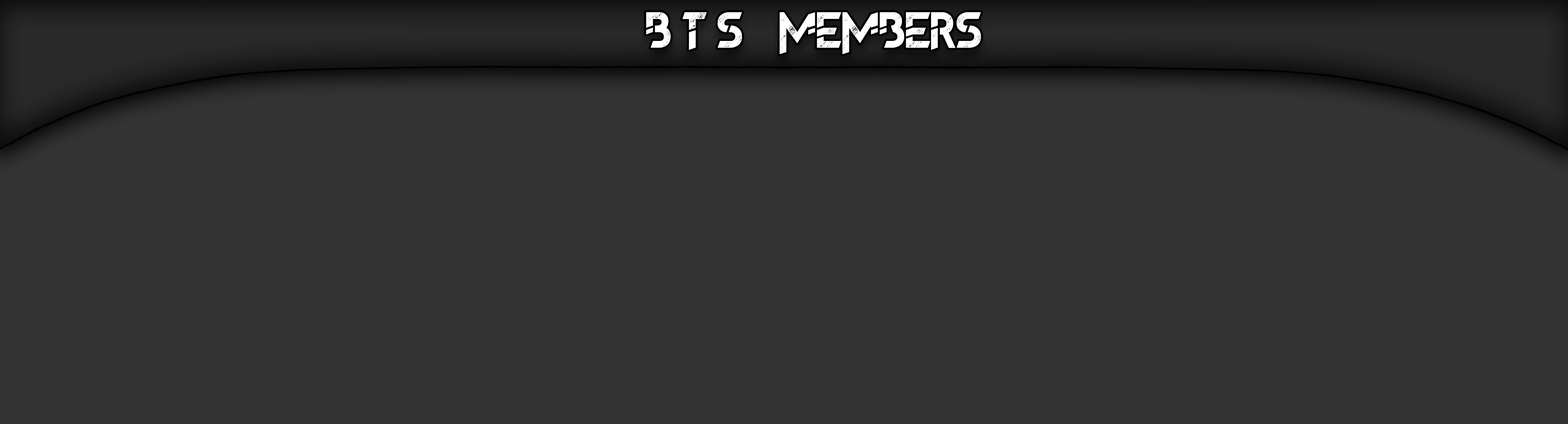
<style>
.page{position:relative;width:1568px;height:424px;background:#333333}
.page>*{position:absolute;margin:0}
.t1{font:51.8px "TheFrontMan2demo";color:#ffffff}
.t2{font:51.8px "TheFrontMan2demo";letter-spacing:0.25em;color:#ffffff}
</style>
<div class="page">
<p class="t1" style="left:646px;top:12px;width:335px;height:42px"><span class="t2">Bts</span> members</p>
</div>
